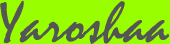
<style>
.page{position:relative;width:170px;height:44px;background:#99ff00}
.page>*{position:absolute;margin:0}
.t1{font:60px "Mistral";color:#555555}
</style>
<div class="page">
<p class="t1" style="left:0px;top:0px;width:170px;height:44px">Yaroshaa</p>
</div>
